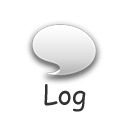
<style>
.page{position:relative;width:128px;height:128px;background:#ffffff}
.page>*{position:absolute;margin:0}
.t1{font:26.8px "ComicSansMS";color:#323232}
</style>
<div class="page">
<p class="t1" style="left:44px;top:84px;width:42px;height:28px">Log</p>
</div>
